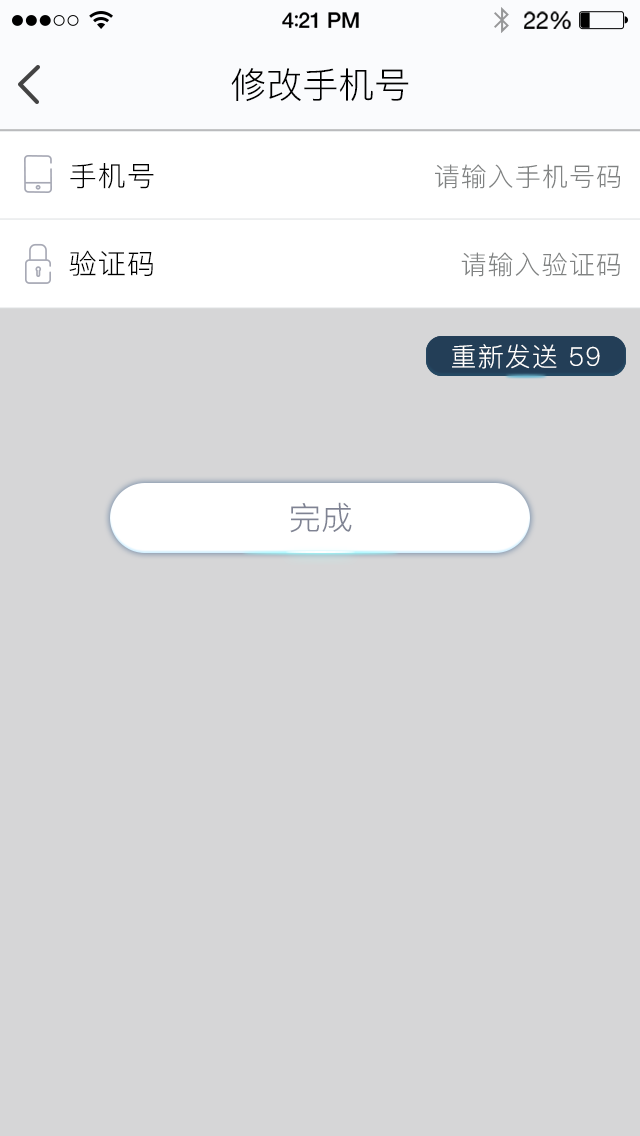
<style>
.page{position:relative;width:640px;height:1136px;background:#d6d6d7}
.page>*{position:absolute;margin:0}
.t1{font:36px "PingFang-SC-Regular";color:#000000}
.t2{font:28px "PingFang-SC-Regular";letter-spacing:0.04em;color:#000000}
.t3{font:26px "PingFang-SC-Regular";letter-spacing:0.04em;color:#808282}
.t4{font:26px "PingFang-SC-Regular";letter-spacing:0.04em;color:#ffffff}
.t5{font:32px "PingFang-SC-Regular";color:#7f8393}
</style>
<div class="page">
<p class="t1" style="left:231px;top:68px;width:178px;height:34px">修改手机号</p>
<p class="t2" style="left:70px;top:163px;width:84px;height:26px">手机号</p>
<p class="t3" style="left:435px;top:164px;width:185px;height:25px">请输入手机号码</p>
<p class="t2" style="left:69px;top:250px;width:84px;height:26px">验证码</p>
<p class="t3" style="left:461px;top:252px;width:159px;height:25px">请输入验证码</p>
<p class="t4" style="left:452px;top:344px;width:148px;height:25px">重新发送 59</p>
<p class="t5" style="left:290px;top:502px;width:62px;height:31px">完成</p>
</div>
